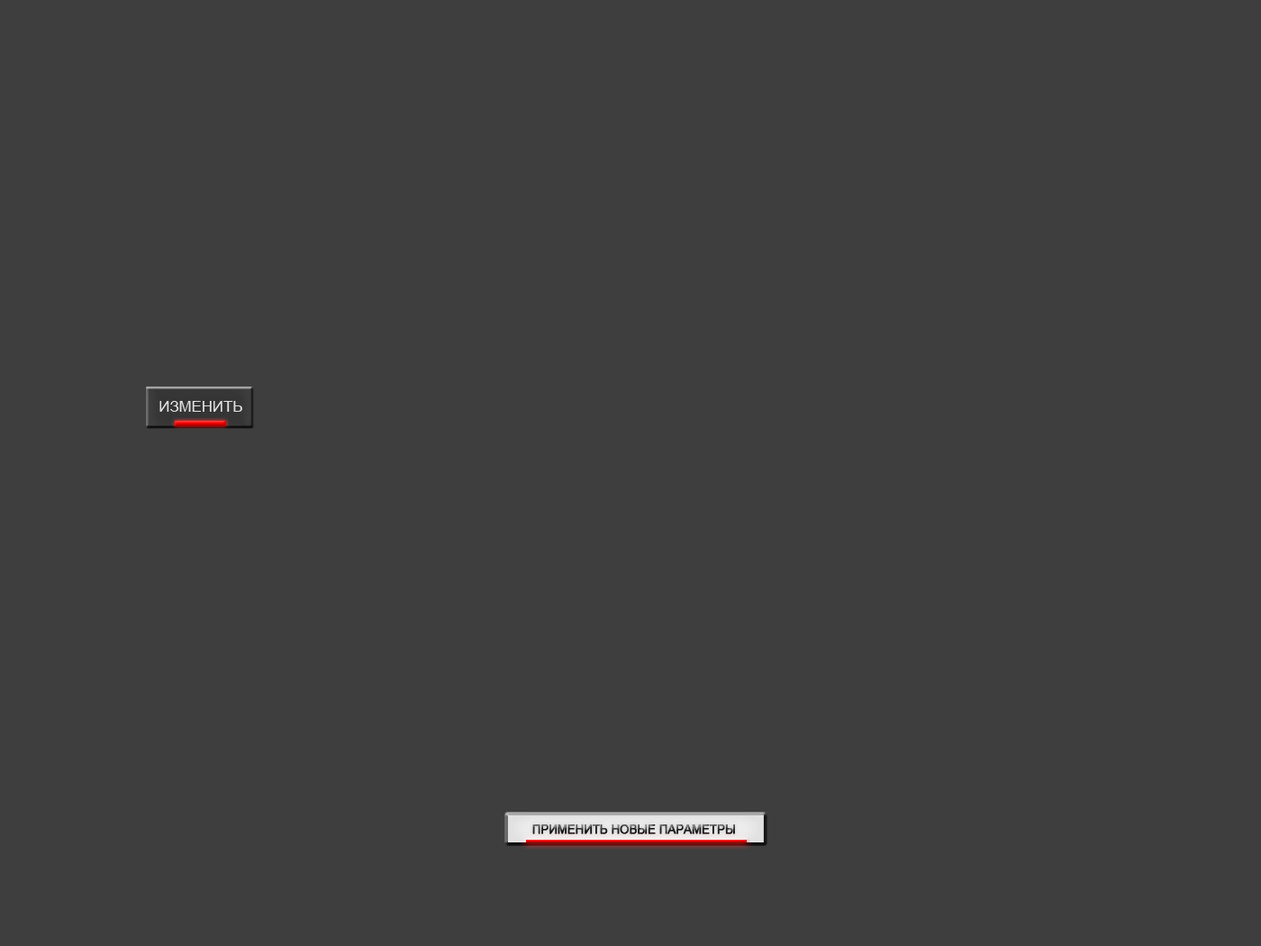
<style>
.page{position:relative;width:1261px;height:946px;background:#3e3e3e}
.page>*{position:absolute;margin:0}
.t1{font:15.1px "ArialMT";color:#e1e1e1;text-transform:uppercase}
.t2{font:11.5px "ArialMT";text-transform:uppercase;font-weight:bold}
</style>
<div class="page">
<p class="t1" style="left:159px;top:401px;width:83px;height:11px">изменить</p>
<p class="t2" style="left:532px;top:824px;width:203px;height:10px">применить новые параметры</p>
</div>
